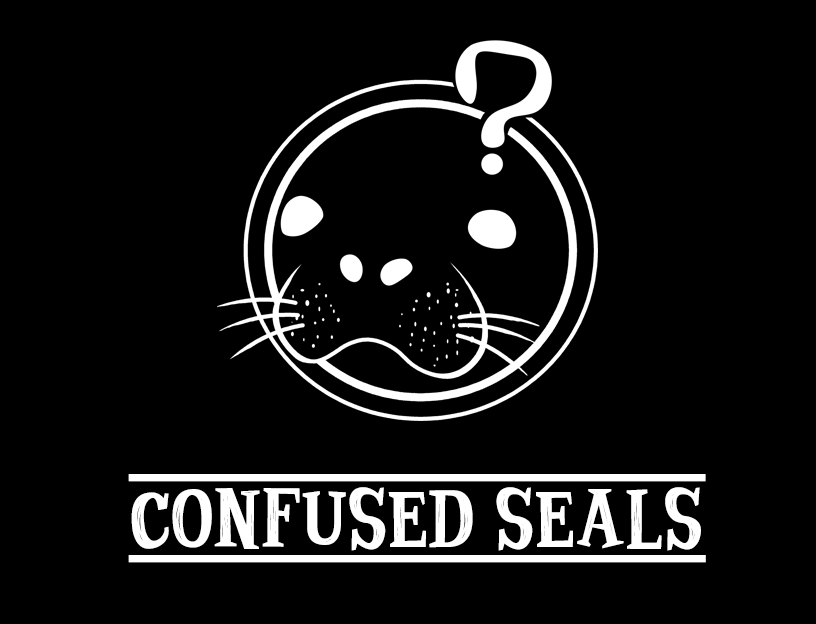
<style>
.page{position:relative;width:816px;height:624px;background:#000000}
.page>*{position:absolute;margin:0}
.t1{font:72.4px "AncientAd";color:#ffffff;font-weight:bold}
</style>
<div class="page">
<p class="t1" style="left:128px;top:474px;width:578px;height:89px">CONFUSED SEALS</p>
</div>
